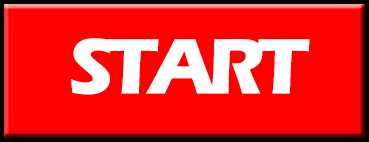
<style>
.page{position:relative;width:369px;height:142px;background:#ff0000}
.page>*{position:absolute;margin:0}
.t1{font:140px "ErasITC-Bold";letter-spacing:-0.1em;color:#ffffff}
.t2{font:48px "ErasITC-Bold";letter-spacing:-0.1em;color:#ffffff}
</style>
<div class="page">
<p class="t1" style="left:71px;top:38px;width:239px;height:57px"><span class="t2"><br><br><br><br><br><br><br><br><br><br><br><br><br></span><br><br><br><br>START</p>
</div>
